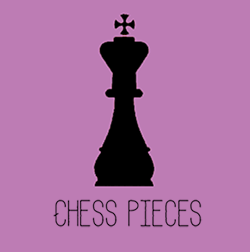
<style>
.page{position:relative;width:250px;height:252px;background:#bd7cb4}
.page>*{position:absolute;margin:0}
.t1{font:51.8px "Adrift";color:#000000}
</style>
<div class="page">
<p class="t1" style="left:53px;top:199px;width:150px;height:29px">Chess Pieces</p>
</div>
